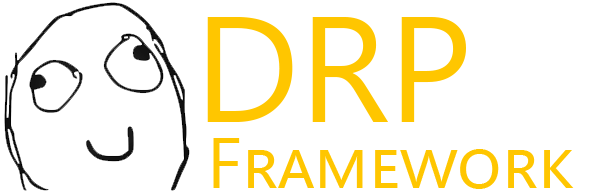
<style>
.page{position:relative;width:600px;height:193px;background:#ffffff}
.page>*{position:absolute;margin:0}
.t1{font:150px "SegoeUI";color:#ffc600;font-variant:small-caps}
.t2{font:72px "SegoeUI";color:#ffc600;font-variant:small-caps}
</style>
<div class="page">
<p class="t1" style="left:207px;top:17px;width:259px;height:105px">DRP</p>
<p class="t2" style="left:213px;top:138px;width:361px;height:51px">Framework</p>
</div>
